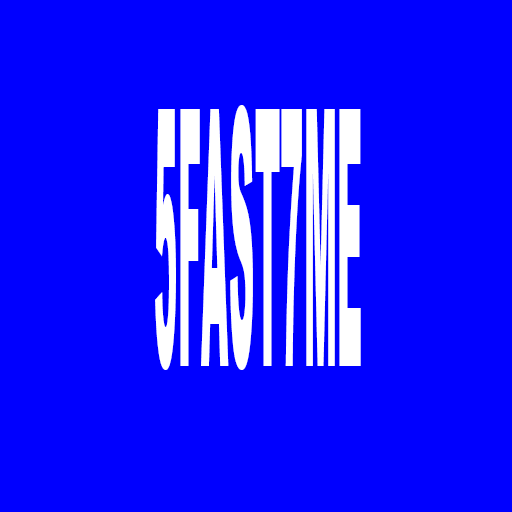
<style>
.page{position:relative;width:512px;height:512px;background:#0000ff}
.page>*{position:absolute;margin:0}
.t1{font:358.9px "Arial-Black";color:#ffffff;scale:0.1 1}
</style>
<div class="page">
<p class="t1" style="left:155px;top:105px;width:206px;height:265px">5FAST7ME</p>
</div>
